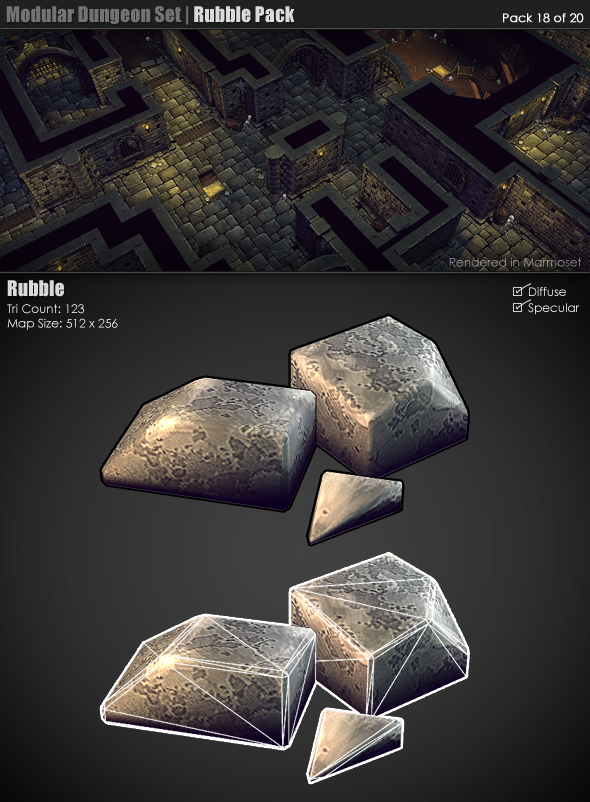
<style>
.page{position:relative;width:590px;height:802px}
.page>*{position:absolute;margin:0}
.t1{font:20px "Impact";color:#737373}
.t2{font:20px "Impact";color:#dadada}
.t3{font:12px "CenturyGothic";color:#ffffff;font-weight:bold}
.t4{font:12px "CenturyGothic";color:#a0a09c}
.t5{font:12px "CenturyGothic";color:#ffffff}
</style>
<div class="page">
<p class="t1" style="left:6px;top:6px;width:289px;height:19px">Modular Dungeon Set |<span class="t2"> Rubble Pack</span></p>
<p class="t3" style="left:503px;top:13px;width:81px;height:10px">Pack 18 of 20</p>
<p class="t4" style="left:449px;top:257px;width:132px;height:10px">Rendered in Marmoset</p>
<p class="t2" style="left:7px;top:280px;width:57px;height:17px">Rubble</p>
<p class="t5" style="left:7px;top:304px;width:111px;height:26px">Tri Count: 123<br>Map Size: 512 x 256</p>
</div>
